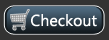
<style>
.page{position:relative;width:109px;height:40px;background:#333333}
.page>*{position:absolute;margin:0}
.t1{font:16px "Ebrima";color:#ffffff}
</style>
<div class="page">
<p class="t1" style="left:31px;top:14px;width:66px;height:13px">Checkout</p>
</div>
